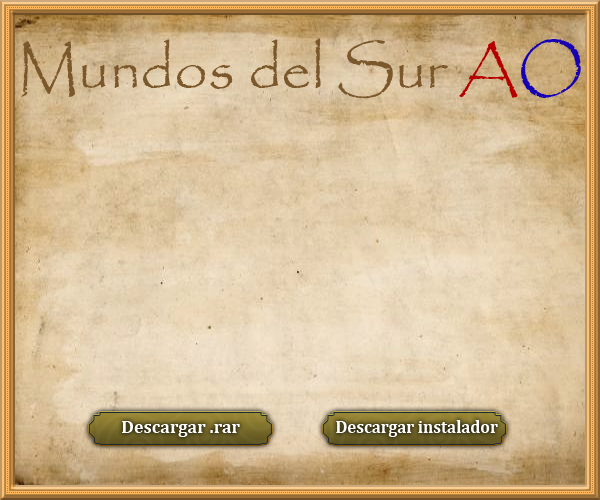
<style>
.page{position:relative;width:600px;height:500px}
.page>*{position:absolute;margin:0}
.t1{font:60px "Papyrus-Regular";color:#7b582b}
.t2{font:60px "Papyrus-Regular";color:#b60000}
.t3{font:60px "Papyrus-Regular";color:#1500b6}
.t4{font:18px "Cambria-Bold";color:#ffffff}
.t5{font:18px "Cambria-Bold";color:#ffffff;scale:0.93 1}
</style>
<div class="page">
<p class="t1" style="left:21px;top:38px;width:560px;height:61px">Mundos del Sur <span class="t2">A</span><span class="t3">O</span></p>
<p class="t4" style="left:122px;top:421px;width:118px;height:16px">Descargar .rar</p>
<p class="t5" style="left:336px;top:420px;width:162px;height:17px">Descargar instalador</p>
</div>
